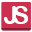
<style>
.page{position:relative;width:32px;height:32px;background:#cd304e}
.page>*{position:absolute;margin:0}
.t1{font:25px "ArialRoundedMTBold";color:#ffffff}
</style>
<div class="page">
<p class="t1" style="left:4px;top:6px;width:12px;height:18px">J</p>
<p class="t1" style="left:13px;top:6px;width:15px;height:18px">S</p>
</div>
